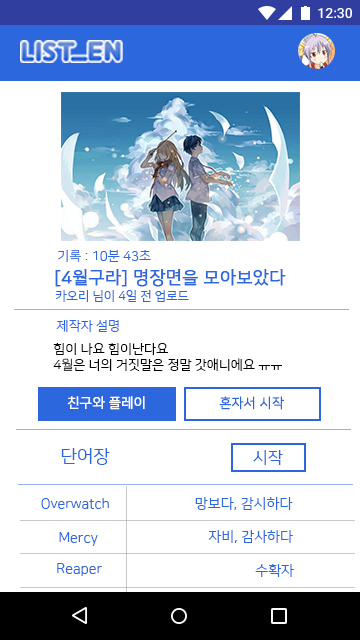
<style>
.page{position:relative;width:360px;height:640px;background:#ffffff}
.page>*{position:absolute;margin:0}
.t1{font:13.2px "NanumSquareR";color:#2d67dd}
.t2{font:17.5px "NanumSquareR";color:#2d67dd;font-weight:bold}
.t3{font:12.5px "NanumSquareR";color:#2d67dd}
.t4{font:13.2px "NanumSquareR";color:#000000}
.t5{font:13.7px "NanumSquareR";color:#ffffff;font-weight:bold}
.t6{font:13.7px "NanumSquareR";color:#2d67dd;font-weight:bold;scale:0.95 1}
.t7{font:18px "NanumSquareR";color:#2d67dd}
.t8{font:16.5px "NanumSquareR";color:#2d67dd}
.t9{font:14.1px "NanumSquareR";color:#2d67dd}
</style>
<div class="page">
<p class="t1" style="left:58px;top:250px;width:93px;height:13px">기록 : 10분 43초</p>
<p class="t2" style="left:55px;top:269px;width:231px;height:18px">[4월구라] 명장면을 모아보았다</p>
<p class="t3" style="left:55px;top:290px;width:134px;height:12px">카오리 님이 4일 전 업로드</p>
<p class="t1" style="left:56px;top:320px;width:63px;height:12px">제작자 설명</p>
<p class="t4" style="left:53px;top:343px;width:229px;height:28px">힘이 나요 힘이난다요<br>4월은 너의 거짓말은 정말 갓애니에요 ㅠㅠ</p>
<p class="t5" style="left:67px;top:396px;width:78px;height:14px">친구와 플레이</p>
<p class="t6" style="left:219px;top:396px;width:65px;height:14px">혼자서 시작</p>
<p class="t7" style="left:61px;top:448px;width:49px;height:17px">단어장</p>
<p class="t8" style="left:253px;top:450px;width:30px;height:15px">시작</p>
<p class="t9" style="left:195px;top:497px;width:98px;height:13px">망보다, 감시하다</p>
<p class="t9" style="left:41px;top:498px;width:68px;height:11px">Overwatch</p>
<p class="t9" style="left:59px;top:532px;width:39px;height:14px">Mercy</p>
<p class="t9" style="left:208px;top:530px;width:85px;height:13px">자비, 감사하다</p>
<p class="t9" style="left:57px;top:563px;width:45px;height:13px">Reaper</p>
<p class="t9" style="left:255px;top:564px;width:39px;height:13px">수확자</p>
</div>
